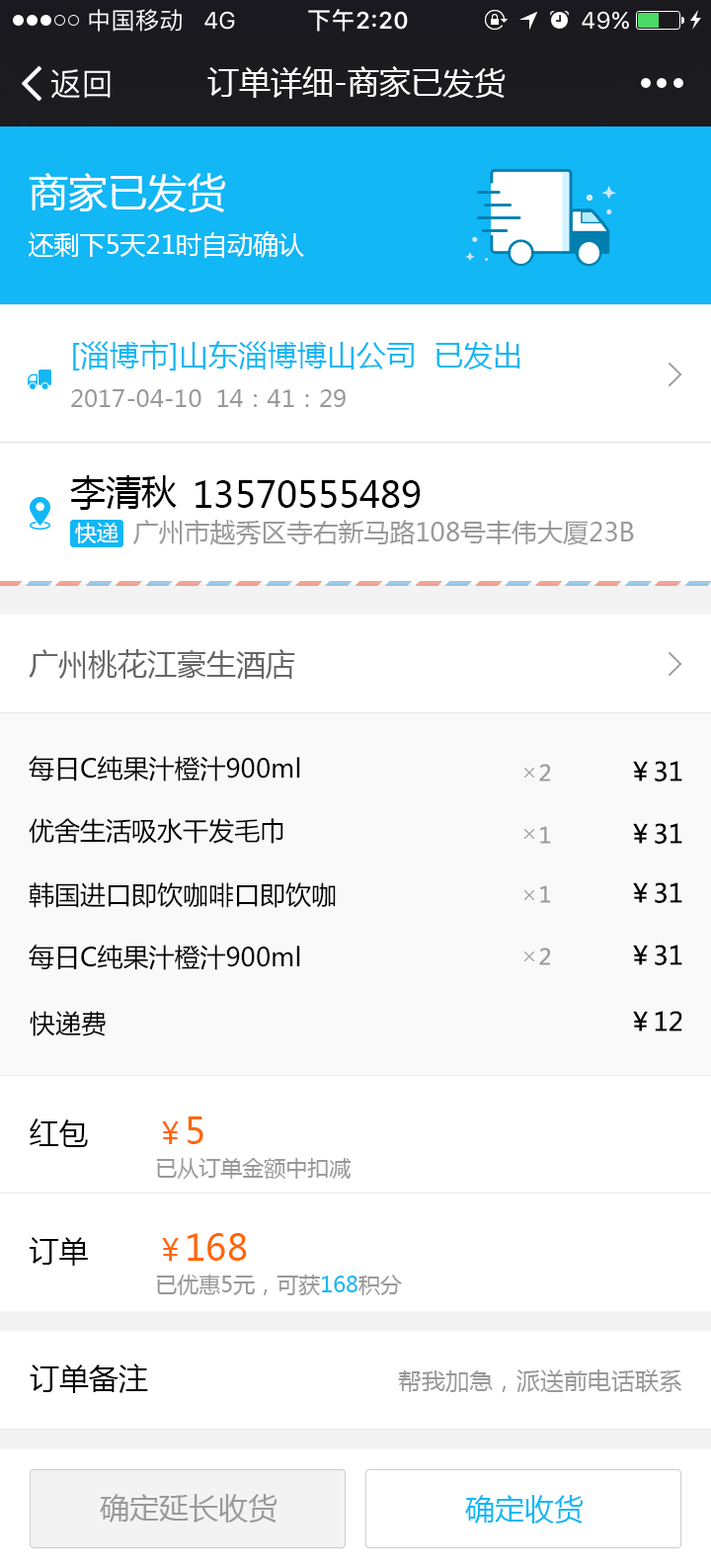
<style>
.page{position:relative;width:711px;height:1568px;background:#ffffff}
.page>*{position:absolute;margin:0}
.t1{font:31.6px "MicrosoftYaHei";color:#ffffff}
.t2{font:25.7px/35.6px "MicrosoftYaHei";color:#ffffff}
.t3{font:39.5px/59.3px "MicrosoftYaHei";color:#ffffff}
.t4{font:29.6px "MicrosoftYaHei";color:#12b7f5}
.t5{font:23.7px "MicrosoftYaHei";color:#999999}
.t6{font:35.6px "MicrosoftYaHei";color:#000000}
.t7{font:25.7px "MicrosoftYaHei";color:#999999}
.t8{font:21.7px "MicrosoftYaHei";color:#ffffff}
.t9{font:29.6px "MicrosoftYaHei";color:#666666}
.t10{font:25.7px "MicrosoftYaHei";color:#000000}
.t11{font:21.7px "MicrosoftYaHei";color:#999999}
.t12{font:29.6px "MicrosoftYaHei";color:#000000}
.t13{font:21.7px/43.5px "MicrosoftYaHei";color:#999999}
.t14{font:29.6px/43.5px "MicrosoftYaHei";color:#ff6600}
.t15{font:35.6px/43.5px "MicrosoftYaHei";color:#ff6600}
.t16{font:21.7px/43.5px "MicrosoftYaHei";color:#12b7f5}
.t17{font:29.6px "MicrosoftYaHei";color:#999999}
</style>
<div class="page">
<p class="t1" style="left:207px;top:66px;width:299px;height:33px">订单详细-商家已发货</p>
<p class="t2" style="left:29px;top:173px;width:275px;height:85px"><span class="t3">商家已发货<br></span>还剩下5天21时自动确认</p>
<p class="t4" style="left:73px;top:340px;width:448px;height:31px">[淄博市]山东淄博博山公司  已发出</p>
<p class="t5" style="left:71px;top:389px;width:275px;height:18px">2017-04-10  14：41：29</p>
<p class="t6" style="left:70px;top:475px;width:107px;height:35px">李清秋</p>
<p class="t6" style="left:196px;top:480px;width:225px;height:28px">13570555489</p>
<p class="t7" style="left:132px;top:520px;width:502px;height:25px">广州市越秀区寺右新马路108号丰伟大厦23B</p>
<p class="t8" style="left:75px;top:523px;width:44px;height:20px">快递</p>
<p class="t8" style="left:75px;top:523px;width:44px;height:20px">快递</p>
<p class="t9" style="left:29px;top:649px;width:266px;height:30px">广州桃花江豪生酒店</p>
<p class="t10" style="left:29px;top:756px;width:271px;height:26px">每日C纯果汁橙汁900ml</p>
<p class="t10" style="left:633px;top:761px;width:50px;height:21px">￥31</p>
<p class="t11" style="left:539px;top:764px;width:11px;height:18px">2</p>
<p class="t10" style="left:29px;top:818px;width:255px;height:26px">优舍生活吸水干发毛巾</p>
<p class="t11" style="left:540px;top:826px;width:11px;height:18px">1</p>
<p class="t10" style="left:633px;top:823px;width:50px;height:21px">￥31</p>
<p class="t10" style="left:29px;top:882px;width:307px;height:26px">韩国进口即饮咖啡口即饮咖</p>
<p class="t11" style="left:540px;top:885px;width:11px;height:18px">1</p>
<p class="t10" style="left:633px;top:882px;width:50px;height:21px">￥31</p>
<p class="t10" style="left:29px;top:945px;width:271px;height:25px">每日C纯果汁橙汁900ml</p>
<p class="t11" style="left:539px;top:948px;width:11px;height:17px">2</p>
<p class="t10" style="left:633px;top:945px;width:50px;height:20px">￥31</p>
<p class="t10" style="left:30px;top:1011px;width:76px;height:25px">快递费</p>
<p class="t10" style="left:633px;top:1011px;width:50px;height:21px">￥12</p>
<p class="t12" style="left:30px;top:1118px;width:58px;height:29px">红包</p>
<p class="t13" style="left:156px;top:1116px;width:196px;height:63px"><span class="t14">￥</span><span class="t15">5<br></span>已从订单金额中扣减</p>
<p class="t12" style="left:30px;top:1237px;width:58px;height:29px">订单</p>
<p class="t13" style="left:156px;top:1233px;width:246px;height:62px"><span class="t14">￥</span><span class="t15">168<br></span>已优惠5元，可获<span class="t16">168</span>积分</p>
<p class="t12" style="left:30px;top:1363px;width:118px;height:30px">订单备注</p>
<p class="t5" style="left:398px;top:1369px;width:285px;height:23px">帮我加急，派送前电话联系</p>
<p class="t17" style="left:100px;top:1494px;width:178px;height:29px">确定延长收货</p>
<p class="t4" style="left:465px;top:1495px;width:119px;height:29px">确定收货</p>
</div>
